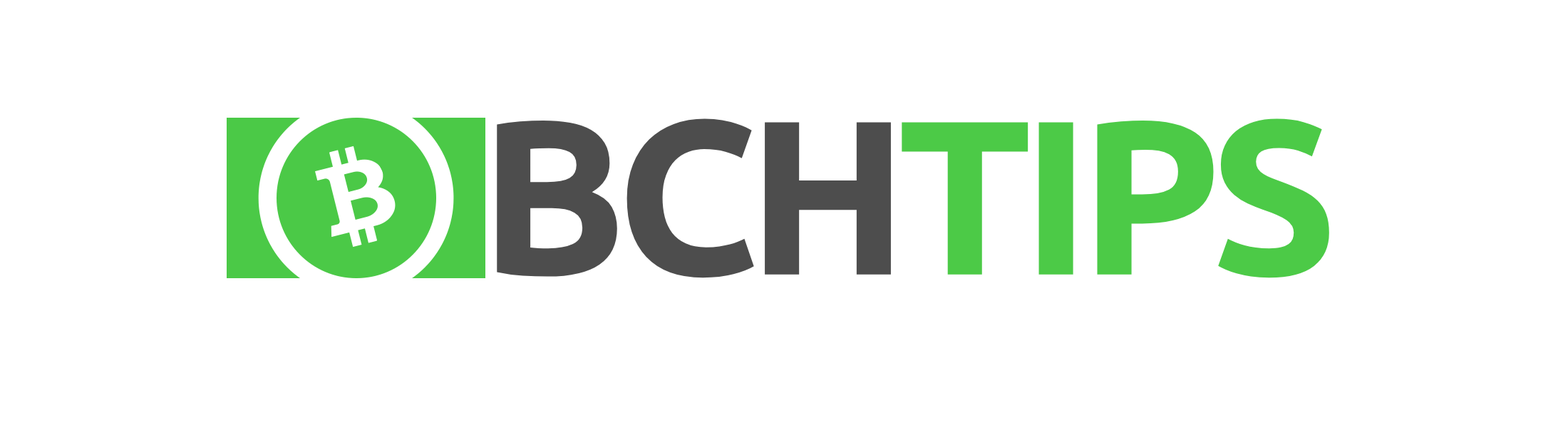
<style>
.page{position:relative;width:1568px;height:428px;background:#ffffff}
.page>*{position:absolute;margin:0}
.t1{font:219.5px "Ubuntu-Bold";letter-spacing:-0.05em;color:#4cca47}
.t2{font:219.5px "Ubuntu-Bold";letter-spacing:-0.05em;color:#4d4d4d}
</style>
<div class="page">
<p class="t1" style="left:497px;top:118px;width:832px;height:160px"><span class="t2">BCH</span>TIPS</p>
</div>
